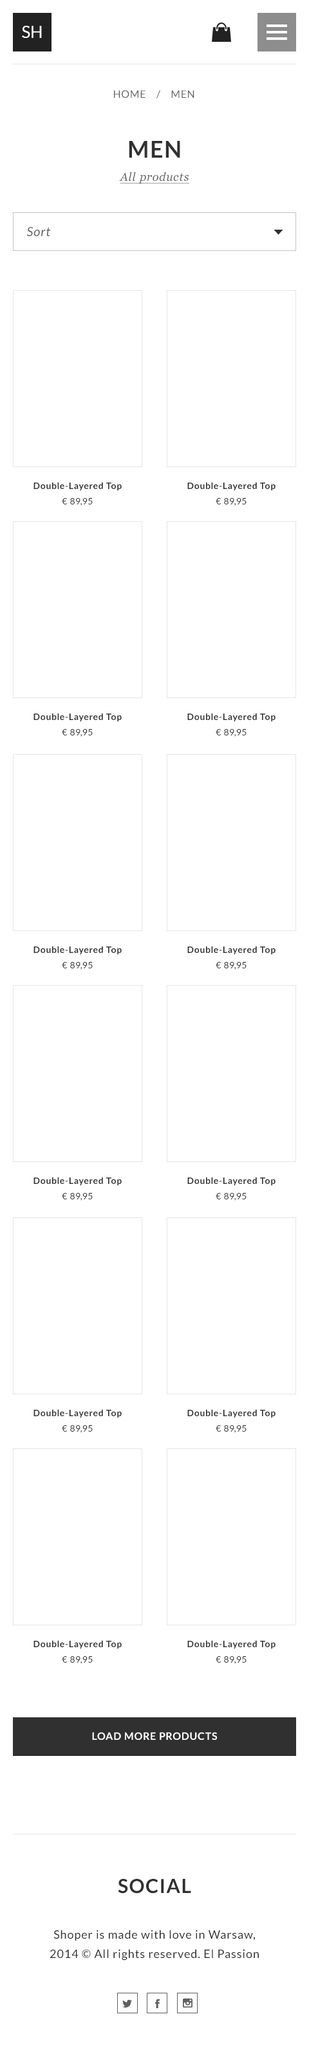
<style>
.page{position:relative;width:309px;height:2059px;background:#ffffff}
.page>*{position:absolute;margin:0}
.t1{font:16.7px "Lato-Regular";color:#ffffff;text-transform:uppercase}
.t2{font:10.3px "Lato-Regular";letter-spacing:0.05em;color:#606060;text-transform:uppercase}
.t3{font:11.6px/23.2px "Georgia-Italic";letter-spacing:0.05em;color:#606060;text-decoration:underline}
.t4{font:23.2px/23.2px "Lato-Bold";letter-spacing:0.05em;color:#303030;text-transform:uppercase}
.t5{font:12.9px "Lato-Italic";letter-spacing:0.05em;color:#606060}
.t6{font:9px/15.4px "Lato-Bold";letter-spacing:0.05em;color:#303030}
.t7{font:9px/15.4px "Lato-Regular";letter-spacing:0.05em;color:#303030}
.t8{font:10.3px "Lato-Bold";letter-spacing:0.05em;color:#ffffff}
.t9{font:19.3px "Lato-Bold";letter-spacing:0.05em;color:#303030;text-transform:uppercase}
.t10{font:11.6px/19.3px "Lato-Regular";letter-spacing:0.05em;color:#303030}
</style>
<div class="page">
<p class="t1" style="left:22px;top:26px;width:20px;height:12px">SH</p>
<p class="t2" style="left:114px;top:90px;width:80px;height:8px">HOME    /    Men</p>
<p class="t3" style="left:119px;top:141px;width:71px;height:43px;text-align:center"><span class="t4">Men<br></span>All products</p>
<p class="t5" style="left:26px;top:226px;width:25px;height:10px">Sort</p>
<p class="t6" style="left:33px;top:482px;width:89px;height:24px;text-align:center">Double-Layered Top<br><span class="t7">€ 89,95</span></p>
<p class="t6" style="left:187px;top:482px;width:88px;height:24px;text-align:center">Double-Layered Top<br><span class="t7">€ 89,95</span></p>
<p class="t6" style="left:33px;top:713px;width:89px;height:24px;text-align:center">Double-Layered Top<br><span class="t7">€ 89,95</span></p>
<p class="t6" style="left:187px;top:713px;width:88px;height:24px;text-align:center">Double-Layered Top<br><span class="t7">€ 89,95</span></p>
<p class="t6" style="left:33px;top:946px;width:89px;height:23px;text-align:center">Double-Layered Top<br><span class="t7">€ 89,95</span></p>
<p class="t6" style="left:187px;top:946px;width:88px;height:23px;text-align:center">Double-Layered Top<br><span class="t7">€ 89,95</span></p>
<p class="t6" style="left:33px;top:1177px;width:89px;height:23px;text-align:center">Double-Layered Top<br><span class="t7">€ 89,95</span></p>
<p class="t6" style="left:187px;top:1177px;width:88px;height:23px;text-align:center">Double-Layered Top<br><span class="t7">€ 89,95</span></p>
<p class="t6" style="left:33px;top:1409px;width:89px;height:24px;text-align:center">Double-Layered Top<br><span class="t7">€ 89,95</span></p>
<p class="t6" style="left:187px;top:1409px;width:88px;height:24px;text-align:center">Double-Layered Top<br><span class="t7">€ 89,95</span></p>
<p class="t6" style="left:33px;top:1640px;width:89px;height:24px;text-align:center">Double-Layered Top<br><span class="t7">€ 89,95</span></p>
<p class="t6" style="left:187px;top:1640px;width:88px;height:24px;text-align:center">Double-Layered Top<br><span class="t7">€ 89,95</span></p>
<p class="t8" style="left:92px;top:1732px;width:125px;height:8px">LOAD MORE PRODUCTS</p>
<p class="t9" style="left:118px;top:1879px;width:73px;height:14px">social</p>
<p class="t10" style="left:50px;top:1929px;width:209px;height:31px;text-align:center">Shoper is made with love in Warsaw,<br>2014 © All rights reserved. El Passion</p>
</div>
